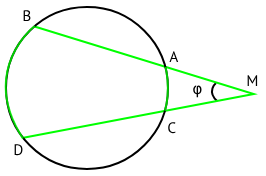
<style>
.page{position:relative;width:266px;height:176px;background:#ffffff}
.page>*{position:absolute;margin:0}
.t1{font:15.2px "PTSans-Regular";color:#000000}
.t2{font:15.2px "DejaVuSans";color:#000000}
</style>
<div class="page">
<p class="t1" style="left:23px;top:10px;width:8px;height:12px">B</p>
<p class="t1" style="left:169px;top:51px;width:10px;height:11px">A</p>
<p class="t1" style="left:247px;top:75px;width:11px;height:11px">M</p>
<p class="t2" style="left:193px;top:85px;width:9px;height:13px">φ</p>
<p class="t1" style="left:168px;top:122px;width:8px;height:12px">C</p>
<p class="t1" style="left:14px;top:144px;width:9px;height:12px">D</p>
</div>
